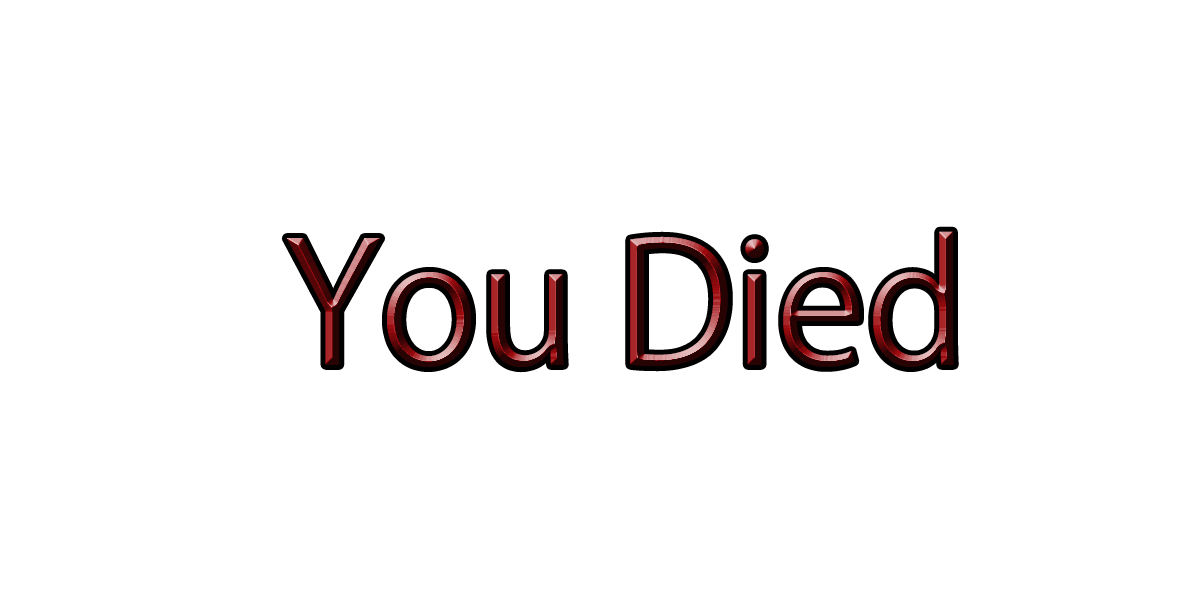
<style>
.page{position:relative;width:1200px;height:600px;background:#ffffff}
.page>*{position:absolute;margin:0}
.t1{font:166.7px "KozGoPr6N-Regular"}
</style>
<div class="page">
<p class="t1" style="left:286px;top:231px;width:668px;height:137px">You Died</p>
</div>
